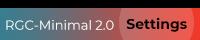
<style>
.page{position:relative;width:200px;height:40px;background:#000000}
.page>*{position:absolute;margin:0}
.t1{font:14px "Montserrat-Bold";color:#000000}
.t2{font:13px "Montserrat-Regular";color:#ffffff}
</style>
<div class="page">
<p class="t1" style="left:126px;top:17px;width:61px;height:15px">Settings</p>
<p class="t2" style="left:6px;top:20px;width:108px;height:10px">RGC-Minimal 2.0</p>
</div>
